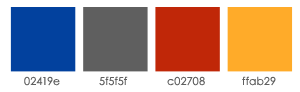
<style>
.page{position:relative;width:300px;height:92px;background:#ffffff}
.page>*{position:absolute;margin:0}
.t1{font:11px "CenturyGothic";color:#5f5f5f}
</style>
<div class="page">
<p class="t1" style="left:24px;top:76px;width:36px;height:10px">02419e</p>
<p class="t1" style="left:99px;top:76px;width:29px;height:10px">5f5f5f</p>
<p class="t1" style="left:167px;top:76px;width:38px;height:10px">c02708</p>
<p class="t1" style="left:242px;top:76px;width:34px;height:10px">ffab29</p>
</div>
